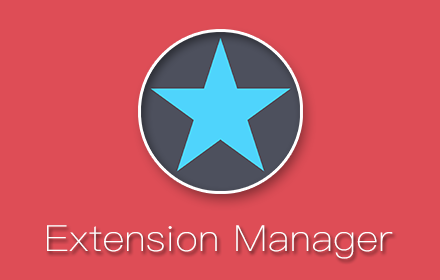
<style>
.page{position:relative;width:440px;height:280px;background:#de4d56}
.page>*{position:absolute;margin:0}
.t1{font:36px "PingFangSC-Thin";letter-spacing:0.01em;color:#ffffff;scale:1.1 1}
</style>
<div class="page">
<p class="t1" style="left:47px;top:225px;width:346px;height:34px">Extension Manager</p>
</div>
